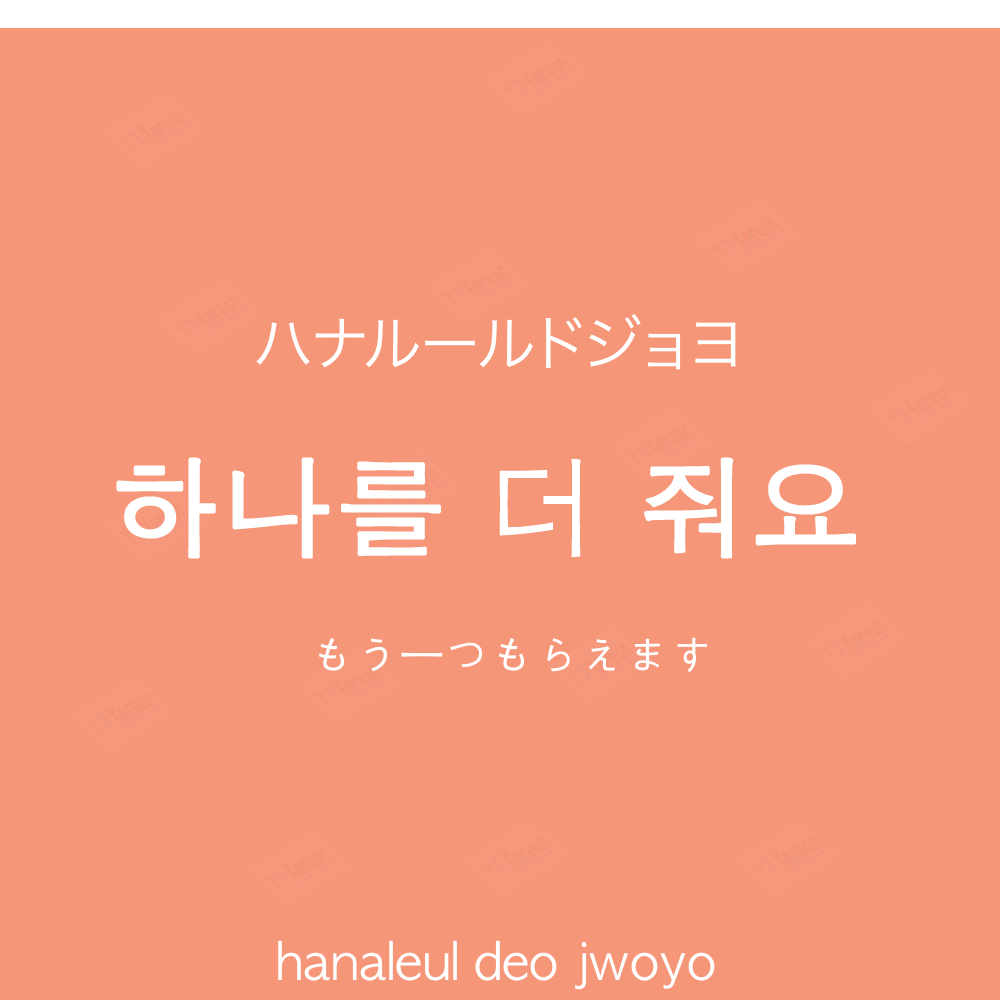
<style>
.page{position:relative;width:1000px;height:1000px;background:#f69679}
.page>*{position:absolute;margin:0}
.t1{font:60px "HiraKakuProN-W3";color:#ffffff}
.t2{font:110px "AppleGothic";color:#ffffff;font-weight:bold}
.t3{font:45px "AppleGothic";color:#ffffff}
.t4{font:50px "AppleGothic";color:#ffffff}
</style>
<div class="page">
<p class="t1" style="left:256px;top:314px;width:480px;height:56px">ハナルールドジョヨ</p>
<p class="t2" style="left:116px;top:457px;width:740px;height:102px">하나를 더 줘요</p>
<p class="t3" style="left:319px;top:637px;width:388px;height:35px">もう一つもらえます</p>
<p class="t4" style="left:278px;top:940px;width:437px;height:50px">hanaleul deo jwoyo</p>
</div>
